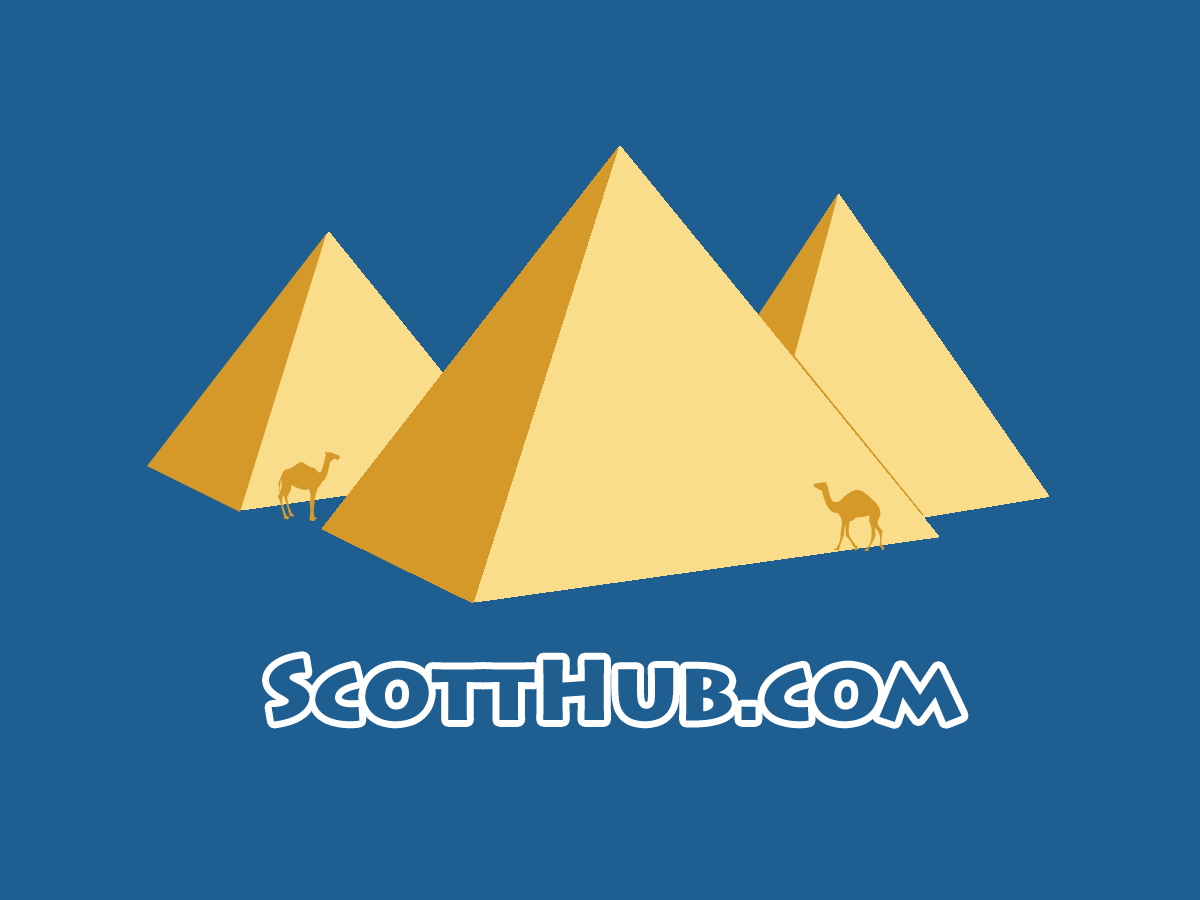
<style>
.page{position:relative;width:1200px;height:900px;background:#1f5e91}
.page>*{position:absolute;margin:0}
.t1{font:85px "LithosPro-Black";color:#1f5e91}
</style>
<div class="page">
<p class="t1" style="left:269px;top:658px;width:693px;height:64px">ScottHub.com</p>
</div>
